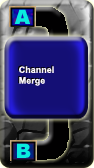
<style>
.page{position:relative;width:94px;height:168px}
.page>*{position:absolute;margin:0}
.t1{font:9px "Arial-BoldMT"}
.t2{font:9px "Arial-BoldMT";color:#fcf8fc}
</style>
<div class="page">
<p class="t1" style="left:18px;top:65px;width:35px;height:20px">Channel<br>Merge</p>
<p class="t2" style="left:19px;top:66px;width:35px;height:20px">Channel<br>Merge</p>
</div>
